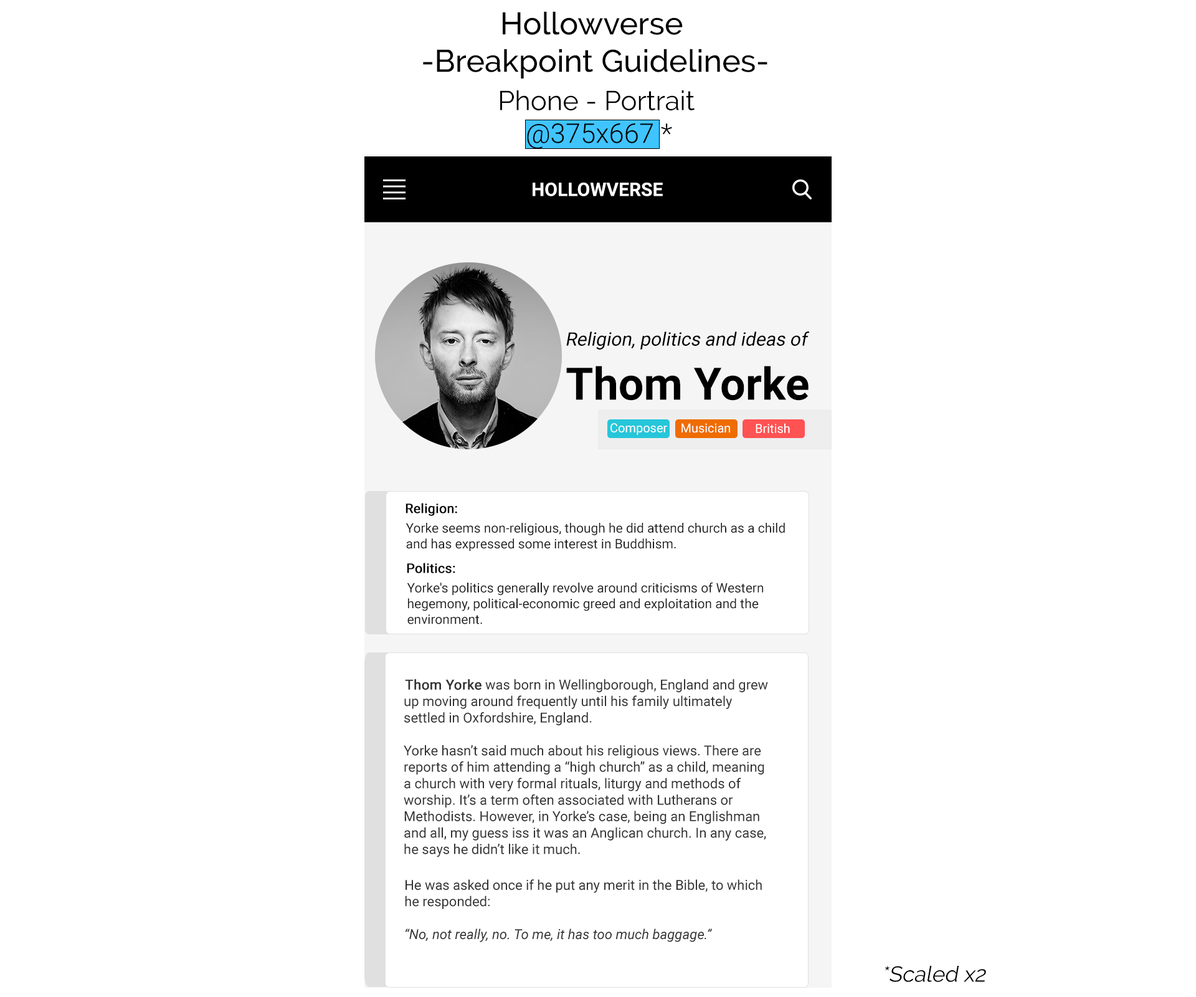
<style>
.page{position:relative;width:1196px;height:997px;background:#ffffff}
.page>*{position:absolute;margin:0}
.t1{font:31.2px "Raleway-Medium";color:#000000}
.t2{font:27.2px "Raleway-Regular";color:#000000}
.t3{font:27.2px "Roboto-Light";color:#000000}
.t4{font:18.7px "Roboto-Bold";color:#ffffff}
.t5{font:18.7px "Roboto-Regular";color:#000000;font-style:italic}
.t6{font:44.9px "Roboto-Bold";color:#000000}
.t7{font:12.5px "Roboto-Regular";color:#ffffff}
.t8{font:13.1px "Roboto-Regular";color:#000000;font-weight:bold}
.t9{font:13.1px "Roboto-Regular";color:#212121}
.t10{font:13.7px "Roboto-Regular";color:#333333}
.t11{font:13.7px "Roboto-Regular";color:#000000}
.t12{font:13.7px "Roboto-Regular";color:#333333;font-weight:bold}
.t13{font:13.7px "Roboto-Italic";color:#333333}
.t14{font:21.8px "Raleway-Regular";color:#000000;font-style:italic}
</style>
<div class="page">
<p class="t1" style="left:423px;top:11px;width:345px;height:68px">Hollowverse<br>-Breakpoint Guidelines-</p>
<p class="t2" style="left:500px;top:90px;width:195px;height:59px">Phone - Portrait<br>    <span class="t3">@375x667 *</span></p>
<p class="t4" style="left:533px;top:183px;width:130px;height:13px">HOLLOWVERSE</p>
<p class="t5" style="left:566px;top:331px;width:244px;height:19px">Religion, politics and ideas of</p>
<p class="t6" style="left:566px;top:366px;width:243px;height:35px">Thom Yorke</p>
<p class="t7" style="left:611px;top:423px;width:56px;height:12px">Composer</p>
<p class="t7" style="left:682px;top:423px;width:48px;height:10px">Musician</p>
<p class="t7" style="left:756px;top:423px;width:34px;height:10px">British</p>
<p class="t8" style="left:406px;top:503px;width:51px;height:13px">Religion:</p>
<p class="t9" style="left:406px;top:523px;width:379px;height:28px">Yorke seems non-religious, though he did attend church as a child <br>and has expressed some interest in Buddhism.</p>
<p class="t8" style="left:407px;top:563px;width:48px;height:10px">Politics:</p>
<p class="t9" style="left:407px;top:582px;width:356px;height:42px">Yorke's politics generally revolve around criticisms of Western <br>hegemony, political-economic greed and exploitation and the <br>environment.</p>
<p class="t10" style="left:404px;top:679px;width:364px;height:178px"><span class="t11">    <br></span><span class="t12">    Thom Yorke</span> was born in Wellingborough, England and grew<br>    up moving around frequently until his family ultimately <br>    settled in Oxfordshire, England.<br><br>    Yorke hasn’t said much about his religious views. There are <br>    reports of him attending a “high church” as a child, meaning <br>    a church with very formal rituals, liturgy and methods of <br>    worship. It’s a term often associated with Lutherans or <br>    Methodists. However, in Yorke’s case, being an Englishman <br>    and all, my guess iss it was an Anglican church. In any case, <br>    he says he didn’t like it much<span class="t11">.</span></p>
<p class="t10" style="left:405px;top:879px;width:357px;height:63px">He was asked once if he put any merit in the Bible, to which <br>     he responded:<br><br>   <span class="t13">  “No, not really, no. To me, it has too much baggage.”</span></p>
<p class="t14" style="left:885px;top:966px;width:101px;height:16px">*Scaled x2</p>
</div>
